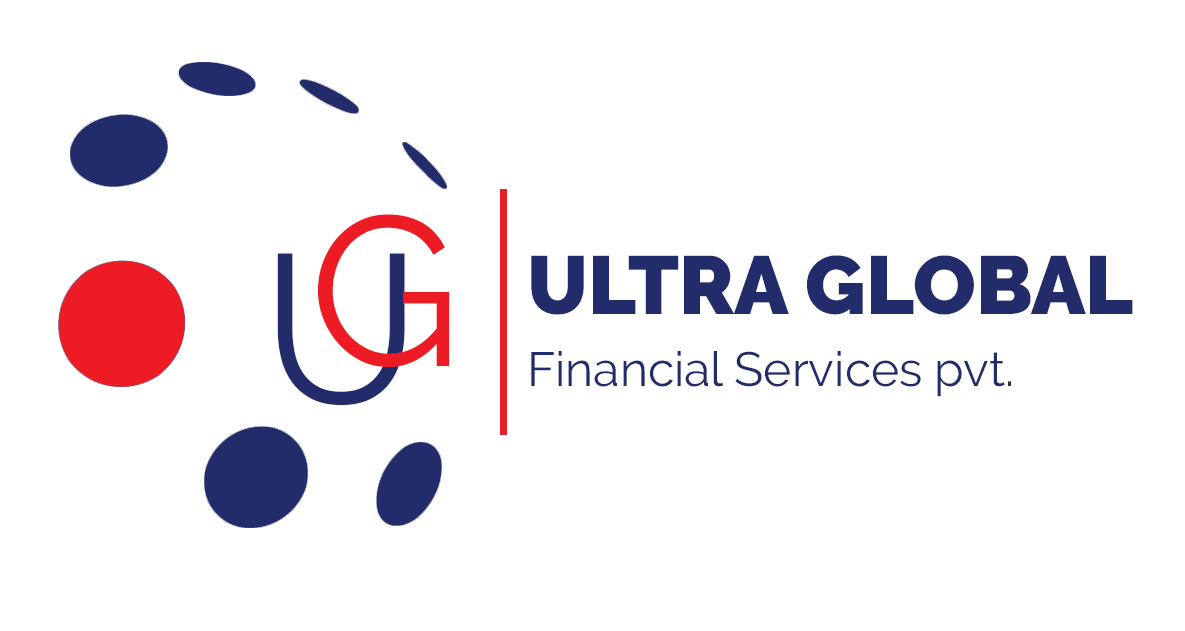
<style>
.page{position:relative;width:1185px;height:631px;background:#ffffff}
.page>*{position:absolute;margin:0}
.t1{font:212px "Raleway-Regular";color:#ed1c24}
.t2{font:212px "Raleway-Regular";color:#222c6a}
.t3{font:48px/72px "Raleway-Regular";color:#222c6a}
.t4{font:82px/131px "Raleway-Black";color:#222c6a;text-transform:uppercase}
</style>
<div class="page">
<p class="t1" style="left:317px;top:214px;width:133px;height:154px">G</p>
<p class="t2" style="left:277px;top:253px;width:128px;height:153px">U</p>
<p class="t3" style="left:531px;top:255px;width:602px;height:142px"><span class="t4">Ultra Global <br></span>Financial Services pvt.</p>
</div>
